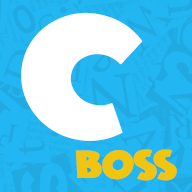
<style>
.page{position:relative;width:192px;height:192px;background:#22b7f2}
.page>*{position:absolute;margin:0}
.t1{font:148.6px "WickedMouse";color:#ffffff;font-weight:bold}
.t2{font:124.4px "WickedMouse";color:#ffffff;font-weight:bold}
.t3{font:33.6px "WickedMouse";color:#f1c40f;font-weight:bold}
</style>
<div class="page">
<p class="t1" style="left:21px;top:12px;width:122px;height:129px;rotate:5deg">C</p>
<p class="t2" style="left:41px;top:26px;width:106px;height:109px;rotate:12deg">C</p>
<p class="t3" style="left:75px;top:149px;width:102px;height:32px">Boss</p>
</div>
